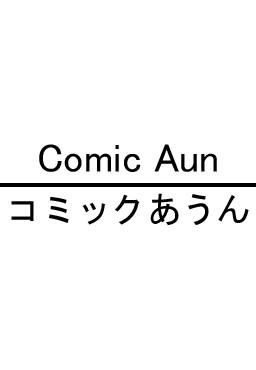
<style>
.page{position:relative;width:256px;height:370px;background:#ffffff}
.page>*{position:absolute;margin:0}
.t1{font:40px "MS-PGothic";color:#000000}
.t2{font:35px "MS-Gothic";color:#000000}
</style>
<div class="page">
<p class="t1" style="left:39px;top:144px;width:178px;height:28px">Comic Aun</p>
<p class="t2" style="left:11px;top:193px;width:238px;height:33px">コミックあうん</p>
</div>
